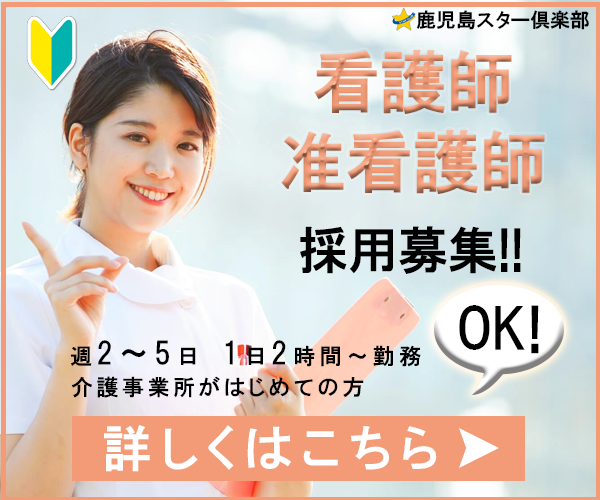
<style>
.page{position:relative;width:600px;height:500px}
.page>*{position:absolute;margin:0}
.t1{font:20px "HGPGothicE";color:#000000}
.t2{font:67px/80px "HGPGothicE";color:#f29b76}
.t3{font:50px "HGPGothicE";color:#000000}
.t4{font:55px "HGPGothicE";color:#000000}
.t5{font:22px "HGPGothicE";letter-spacing:0.2em;color:#000000}
.t6{font:30px "HGPGothicE";letter-spacing:0.2em;color:#000000}
.t7{font:22px "HGPGothicE";letter-spacing:0.16em;color:#000000}
.t8{font:50px "HGPGothicE";letter-spacing:0.16em;color:#ffffff}
</style>
<div class="page">
<p class="t1" style="left:416px;top:10px;width:173px;height:20px">鹿児島スター倶楽部</p>
<p class="t2" style="left:281px;top:50px;width:264px;height:144px;text-align:center">看護師 准看護師</p>
<p class="t3" style="left:300px;top:226px;width:221px;height:48px">採用募集!!</p>
<p class="t4" style="left:459px;top:305px;width:80px;height:49px">OK!</p>
<p class="t5" style="left:71px;top:340px;width:350px;height:27px">週<span class="t6">2～5</span>日　<span class="t6">1</span>日<span class="t6">2</span>時間～勤務</p>
<p class="t7" style="left:71px;top:376px;width:293px;height:22px">介護事業所がはじめての方</p>
<p class="t8" style="left:104px;top:425px;width:333px;height:47px">詳しくはこちら</p>
</div>
